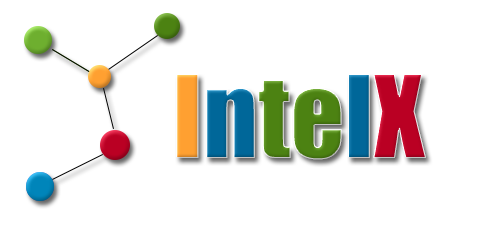
<style>
.page{position:relative;width:480px;height:230px;background:#ffffff}
.page>*{position:absolute;margin:0}
.t1{font:106px "Impact";color:#4c8212}
.t2{font:106px "Impact";color:#ffa031}
.t3{font:106px "Impact";color:#006799}
.t4{font:106px "Impact";color:#ba0023}
</style>
<div class="page">
<p class="t1" style="left:176px;top:74px;width:250px;height:86px"><span class="t2">I</span><span class="t3">n</span>te<span class="t3">l</span><span class="t4">X</span></p>
</div>
